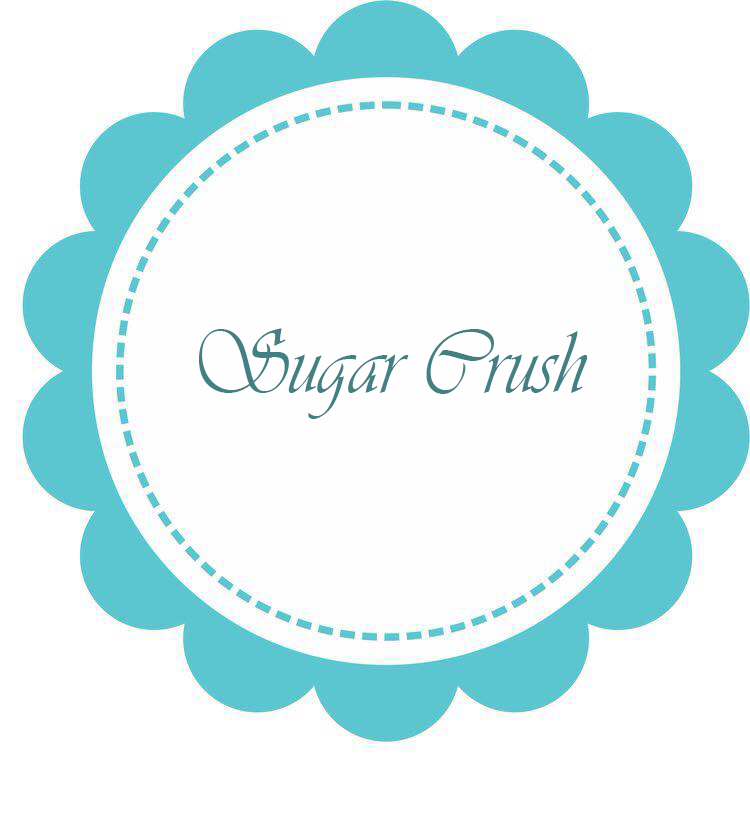
<style>
.page{position:relative;width:750px;height:836px;background:#fefefe}
.page>*{position:absolute;margin:0}
.t1{font:93.3px "Vivaldii";color:#447f84;scale:0.88 1}
</style>
<div class="page">
<p class="t1" style="left:199px;top:328px;width:389px;height:91px">Sugar Crush</p>
</div>
